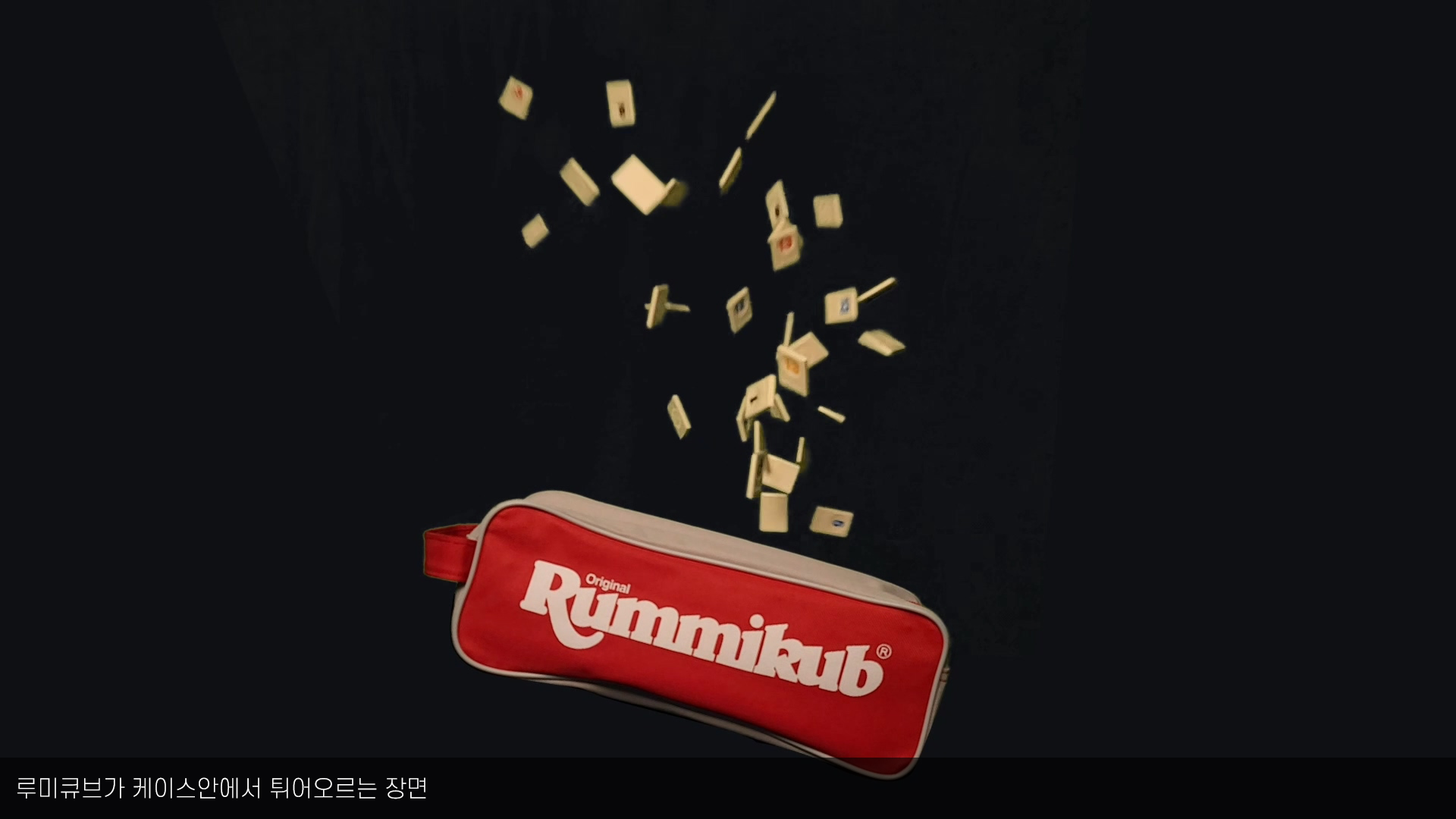
<style>
.page{position:relative;width:1456px;height:819px;background:#0f1014}
.page>*{position:absolute;margin:0}
.t1{font:22.7px "S-CoreDream-2ExtraLight";color:#ffffff}
</style>
<div class="page">
<p class="t1" style="left:17px;top:777px;width:409px;height:22px">루미큐브가 케이스안에서 튀어오르는 장면</p>
</div>
